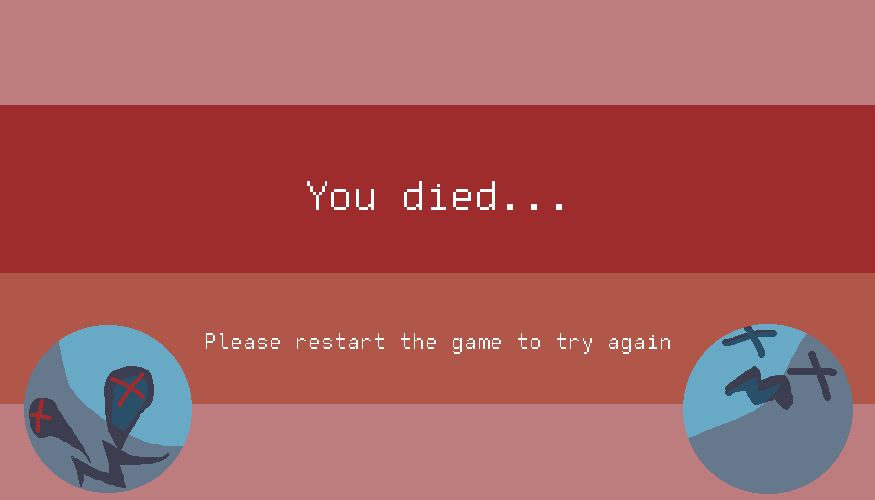
<style>
.page{position:relative;width:875px;height:500px;background:#9f2c2d}
.page>*{position:absolute;margin:0}
.t1{font:46.6px "FreePixel-Regular";color:#ffffff}
.t2{font:25px "FreePixel-Regular";color:#ffffff}
</style>
<div class="page">
<p class="t1" style="left:307px;top:181px;width:255px;height:29px">You died...</p>
<p class="t2" style="left:206px;top:333px;width:464px;height:21px">Please restart the game to try again</p>
</div>
